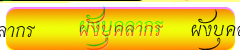
<style>
.page{position:relative;width:240px;height:50px}
.page>*{position:absolute;margin:0}
.t1{font:28px "THCharmonman"}
</style>
<div class="page">
<p class="t1" style="left:79px;top:5px;width:84px;height:42px">ผังบุคลากร</p>
</div>
